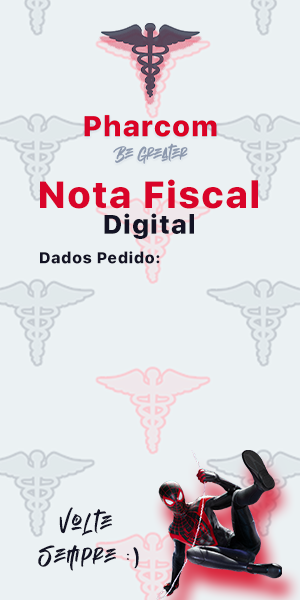
<style>
.page{position:relative;width:300px;height:600px;background:#ebf1f3}
.page>*{position:absolute;margin:0}
.t1{font:37.6px "SFUIDisplay-Heavy";letter-spacing:0.06em;color:#d90429}
.t2{font:26.7px "SFUIDisplay-Heavy";letter-spacing:0.06em;color:#131324}
.t3{font:15.7px "SFUIDisplay-Heavy";letter-spacing:0.06em;color:#131324}
.t4{font:31.2px/33.2px "EmpiresRegular";letter-spacing:0.06em;color:#131324}
</style>
<div class="page">
<p class="t1" style="left:40px;top:179px;width:218px;height:30px">Nota Fiscal</p>
<p class="t2" style="left:104px;top:213px;width:90px;height:26px">Digital</p>
<p class="t3" style="left:40px;top:251px;width:120px;height:13px">Dados Pedido:</p>
<p class="t4" style="left:38px;top:507px;width:101px;height:64px;text-align:center">Volte <br>Sempre :)</p>
</div>
